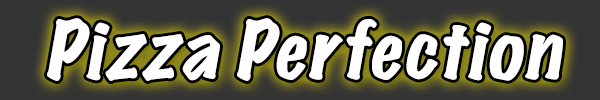
<style>
.page{position:relative;width:600px;height:100px;background:#333333}
.page>*{position:absolute;margin:0}
.t1{font:72px "MarkerFelt-Wide";color:#ffffff;font-style:italic}
</style>
<div class="page">
<p class="t1" style="left:47px;top:18px;width:516px;height:63px">Pizza Perfection</p>
</div>
